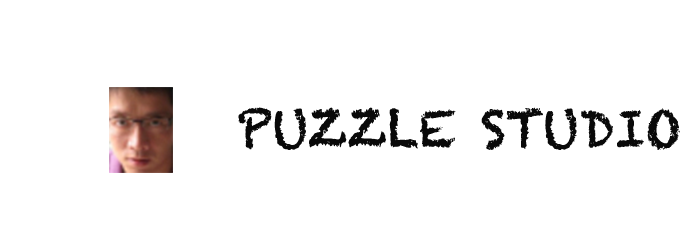
<style>
.page{position:relative;width:700px;height:250px;background:#ffffff}
.page>*{position:absolute;margin:0}
.t1{font:50px "Chalkduster";color:#090909}
</style>
<div class="page">
<p class="t1" style="left:238px;top:107px;width:442px;height:43px">PUZZLE STUDIO</p>
</div>
